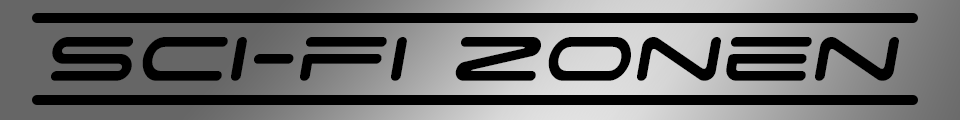
<style>
.page{position:relative;width:960px;height:120px;background:#000000}
.page>*{position:absolute;margin:0}
.t1{font:100px "SpaceAge";color:#000000;font-style:italic}
</style>
<div class="page">
<p class="t1" style="left:51px;top:37px;width:848px;height:44px">sci-fi zonen</p>
</div>
